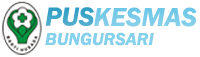
<style>
.page{position:relative;width:200px;height:57px;background:#ffffff}
.page>*{position:absolute;margin:0}
.t1{font:27px "FranklinGothic-DemiItalic";color:#40a6c9}
.t2{font:27px "FranklinGothic-DemiItalic";color:#67c4e5}
.t3{font:18px "FranklinGothic-DemiItalic";color:#85d0ea}
</style>
<div class="page">
<p class="t1" style="left:45px;top:7px;width:49px;height:19px">PUS</p>
<p class="t2" style="left:94px;top:7px;width:103px;height:20px">KESMAS</p>
<p class="t3" style="left:45px;top:32px;width:109px;height:14px">BUNGURSARI</p>
</div>
